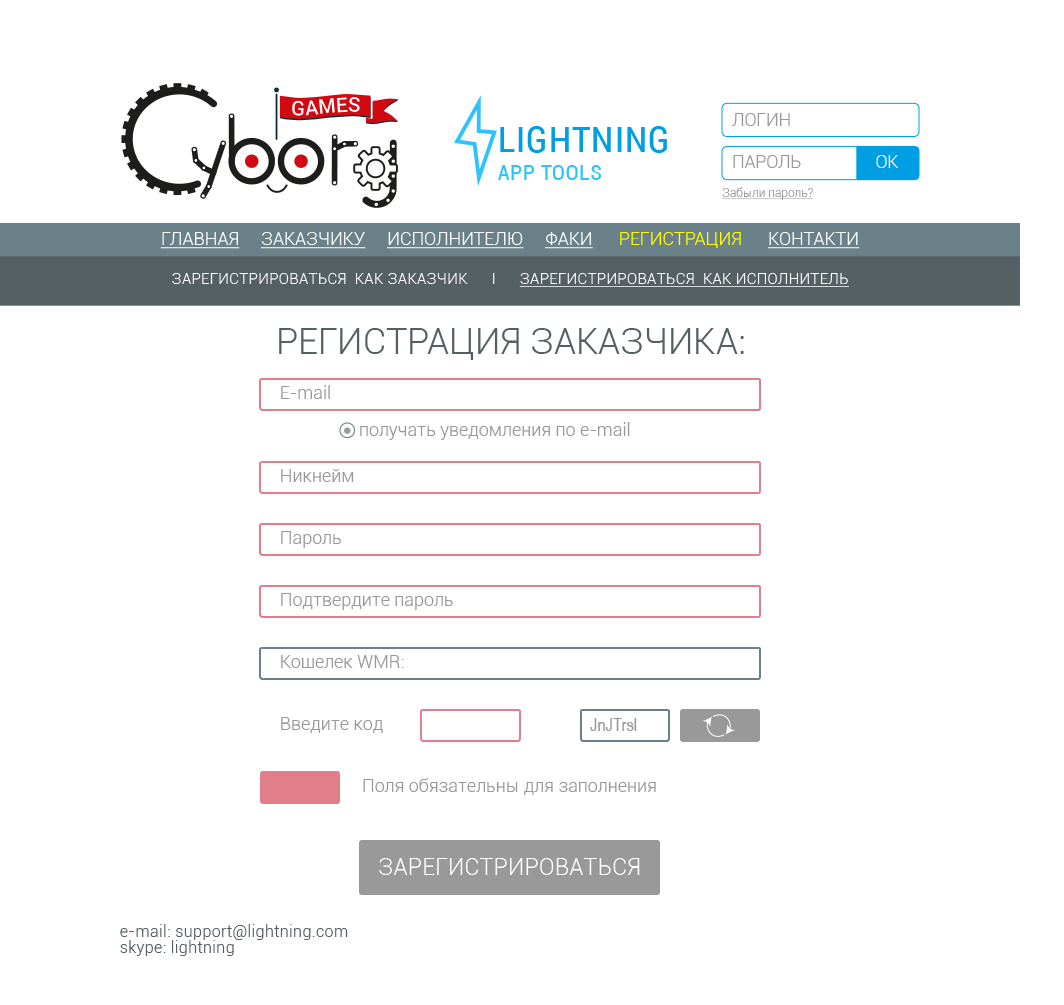
<style>
.page{position:relative;width:1064px;height:1005px;background:#ffffff}
.page>*{position:absolute;margin:0}
.t1{font:17.7px "Roboto-Light";color:#999999;text-transform:uppercase}
.t2{font:37.4px "Roboto-Condensed";letter-spacing:0.025em;color:#009ee3;text-transform:uppercase}
.t3{font:17.7px "Roboto-Light";color:#ffffff;text-transform:uppercase}
.t4{font:22.4px "Roboto-Condensed";letter-spacing:0.025em;color:#2cc3ff;text-transform:uppercase}
.t5{font:12px "Roboto-Light";color:#999999;text-decoration:underline}
.t6{font:18px "Roboto-Light";color:#ffffff;text-transform:uppercase;text-decoration:underline}
.t7{font:18px "Roboto-Light";color:#ffff00;text-transform:uppercase}
.t8{font:15px "Roboto-Light";letter-spacing:0.025em;color:#ffffff;text-transform:uppercase;text-decoration:underline}
.t9{font:15px "Roboto-Light";letter-spacing:0.025em;color:#ffffff;text-transform:uppercase}
.t10{font:15px "Roboto-Light";letter-spacing:0.025em;color:#ffffff}
.t11{font:36px "Roboto-Light";color:#546063;text-transform:uppercase}
.t12{font:18px "Roboto-Light";color:#999999}
.t13{font:18px "ArialNarrow";color:#999999}
.t14{font:23.4px "Roboto-Light";color:#ffffff;text-transform:uppercase}
.t15{font:16px/16px "Roboto-Light";letter-spacing:0.025em;color:#546063}
</style>
<div class="page">
<p class="t1" style="left:732px;top:113px;width:58px;height:13px">логин</p>
<p class="t2" style="left:500px;top:126px;width:167px;height:27px">lightning</p>
<p class="t1" style="left:733px;top:155px;width:68px;height:13px">Пароль</p>
<p class="t3" style="left:876px;top:155px;width:23px;height:13px">ОК</p>
<p class="t4" style="left:498px;top:165px;width:103px;height:15px">app tools</p>
<p class="t5" style="left:721px;top:187px;width:93px;height:13px">Забыли пароль?</p>
<p class="t6" style="left:160px;top:232px;width:700px;height:17px">Главная     Заказчику     Исполнителю     Факи      <span class="t7">регистрация      </span>контакти</p>
<p class="t8" style="left:172px;top:273px;width:677px;height:14px"><span class="t9">Зарегистрироваться  как заказчик</span><span class="t10">      l      </span>Зарегистрироваться  как исполнитель</p>
<p class="t11" style="left:279px;top:328px;width:465px;height:32px">Регистрация заказчика:</p>
<p class="t12" style="left:281px;top:385px;width:49px;height:14px">E-mail</p>
<p class="t12" style="left:360px;top:422px;width:270px;height:18px">получать уведомления по e-mail</p>
<p class="t12" style="left:281px;top:469px;width:73px;height:13px">Никнейм</p>
<p class="t12" style="left:281px;top:531px;width:60px;height:17px">Пароль</p>
<p class="t12" style="left:281px;top:593px;width:172px;height:17px">Подтвердите пароль</p>
<p class="t12" style="left:281px;top:655px;width:123px;height:13px">Кошелек WMR:</p>
<p class="t12" style="left:281px;top:717px;width:102px;height:16px">Введите код</p>
<p class="t13" style="left:590px;top:718px;width:47px;height:13px">JnJTrsl</p>
<p class="t12" style="left:363px;top:778px;width:293px;height:17px">Поля обязательны для заполнения</p>
<p class="t14" style="left:379px;top:858px;width:261px;height:17px">Зарегистрироваться</p>
<p class="t15" style="left:120px;top:924px;width:228px;height:32px">e-mail: support@lightning.com <br>skype: lightning</p>
</div>
